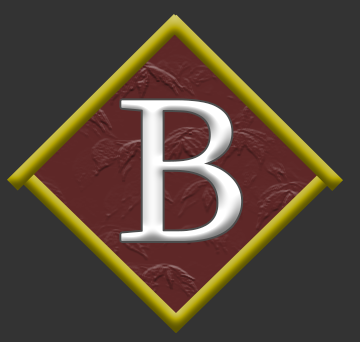
<style>
.page{position:relative;width:360px;height:342px;background:#333333}
.page>*{position:absolute;margin:0}
.t1{font:208.8px "Sylfaen";color:#f0f0f0;scale:1.08 1}
</style>
<div class="page">
<p class="t1" style="left:121px;top:100px;width:121px;height:141px">В</p>
</div>
